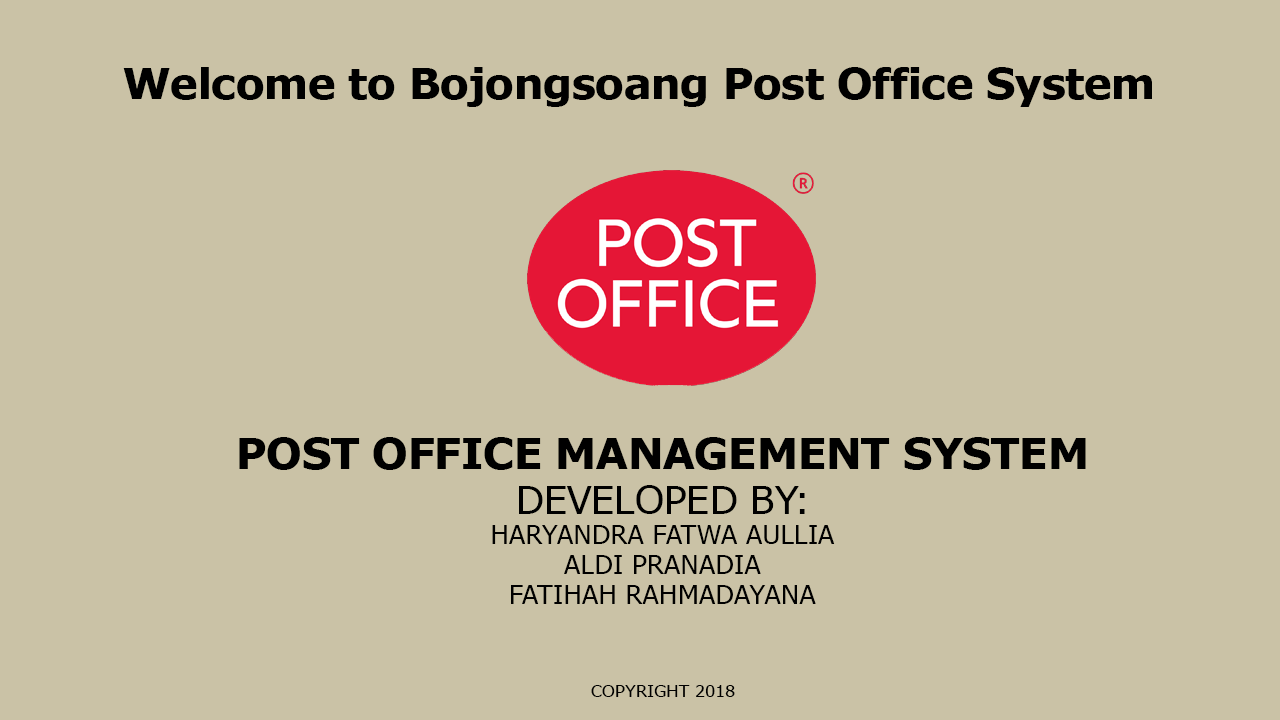
<style>
.page{position:relative;width:1280px;height:720px;background:#cac2a6}
.page>*{position:absolute;margin:0}
.t1{font:41.7px "Tahoma-Bold";color:#000000;scale:1.1 1}
.t2{font:25px "Tahoma";color:#000000;scale:1.1 1}
.t3{font:37.5px "Tahoma";color:#000000;scale:1.1 1}
.t4{font:16.7px "Tahoma";color:#000000;scale:1.1 1}
</style>
<div class="page">
<p class="t1" style="left:123px;top:67px;width:1029px;height:40px">Welcome to Bojongsoang Post Office System</p>
<p class="t2" style="left:239px;top:437px;width:847px;height:167px;text-align:center"><span class="t1">POST OFFICE MANAGEMENT SYSTEM<br></span><span class="t3">DEVELOPED BY:<br></span>HARYANDRA FATWA AULLIA<br>ALDI PRANADIA<br>FATIHAH RAHMADAYANA</p>
<p class="t4" style="left:591px;top:685px;width:144px;height:12px">COPYRIGHT 2018</p>
</div>
